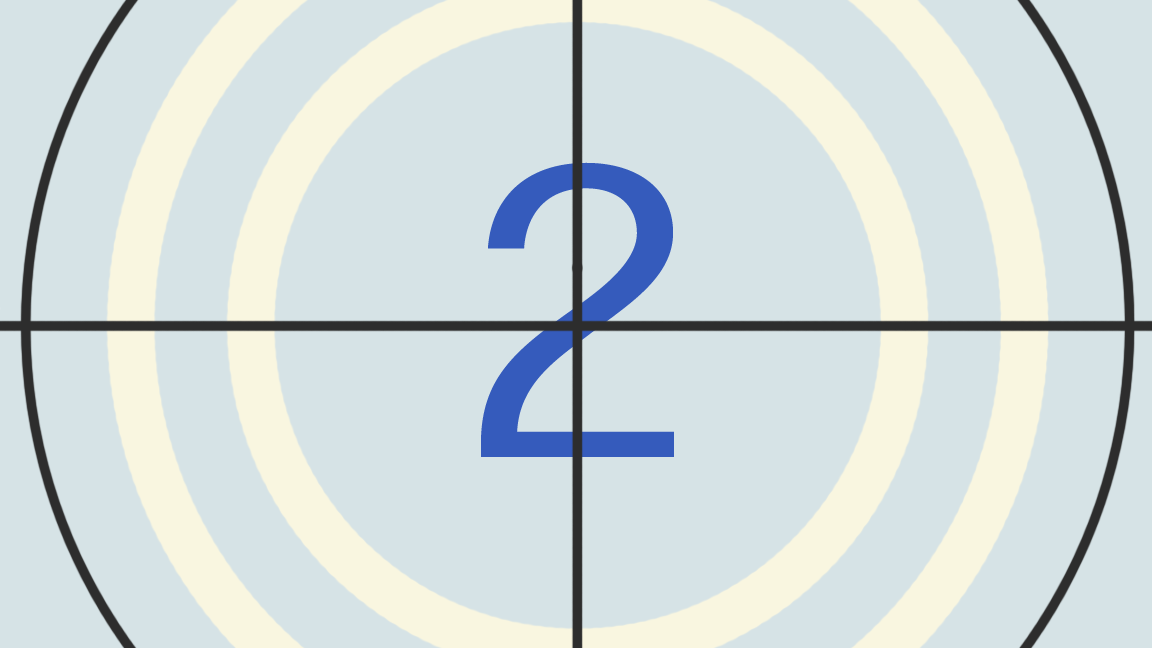
<style>
.page{position:relative;width:1152px;height:648px;background:#d6e3e6}
.page>*{position:absolute;margin:0}
.t1{font:400px "LetterGothicStd-Bold";letter-spacing:0.01em;color:#355bbc;scale:1.2 1}
</style>
<div class="page">
<p class="t1" style="left:481px;top:162px;width:193px;height:295px">2</p>
</div>
